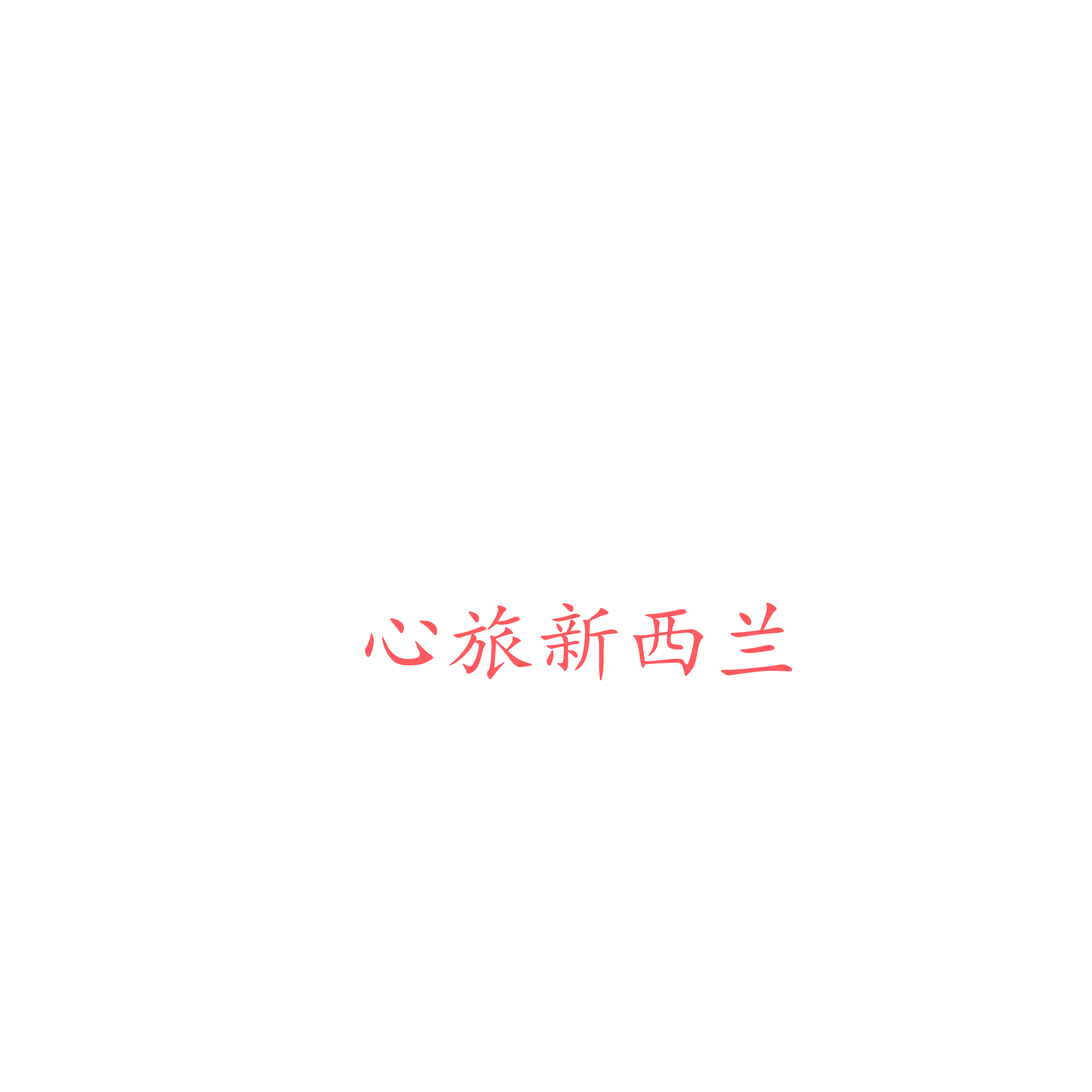
<style>
.page{position:relative;width:1092px;height:1092px;background:#ffffff}
.page>*{position:absolute;margin:0}
.t1{font:88.6px "KaiTi";color:#ff5a60}
</style>
<div class="page">
<p class="t1" style="left:365px;top:602px;width:427px;height:79px">心旅新西兰</p>
</div>
